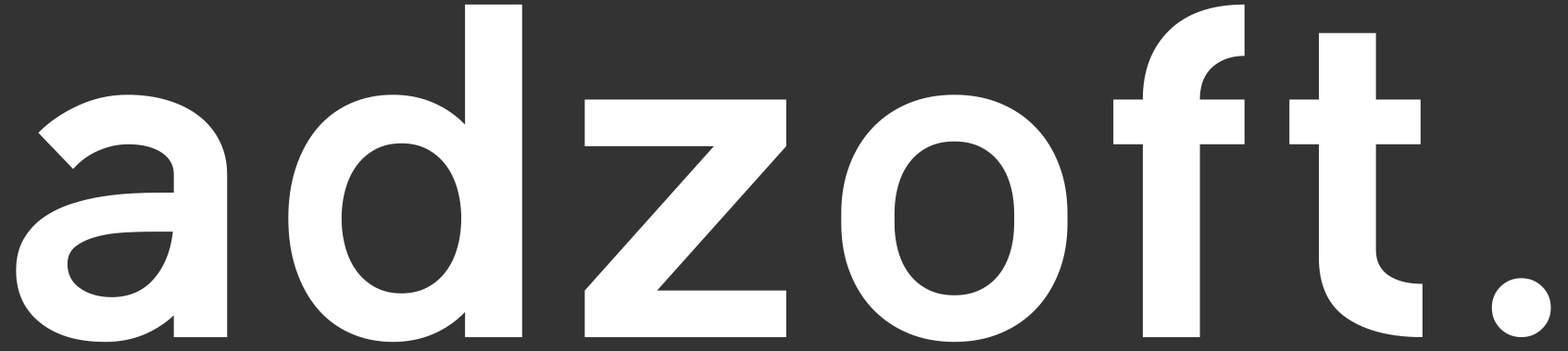
<style>
.page{position:relative;width:1568px;height:351px;background:#333333}
.page>*{position:absolute;margin:0}
.t1{font:475.3px "Latinka-SemiBold";letter-spacing:0.06em;color:#ffffff}
</style>
<div class="page">
<p class="t1" style="left:16px;top:4px;width:1535px;height:339px">adzoft.</p>
</div>
